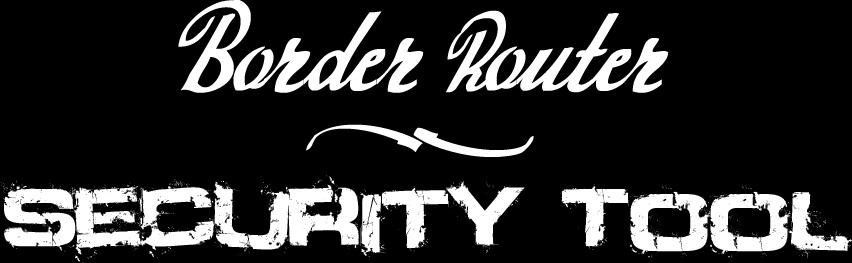
<style>
.page{position:relative;width:852px;height:263px;background:#000000}
.page>*{position:absolute;margin:0}
.t1{font:166.9px "Today";color:#ffffff}
.t2{font:84px "Defused-ExtendedBold";color:#ffffff}
.t3{font:84px "MyriadPro-Regular";color:#ffffff}
</style>
<div class="page">
<p class="t1" style="left:178px;top:0px;width:491px;height:93px">Border Router</p>
<p class="t1" style="left:306px;top:124px;width:228px;height:33px">_</p>
<p class="t2" style="left:0px;top:175px;width:852px;height:88px"><span class="t3"><br></span>Security Tool</p>
</div>
